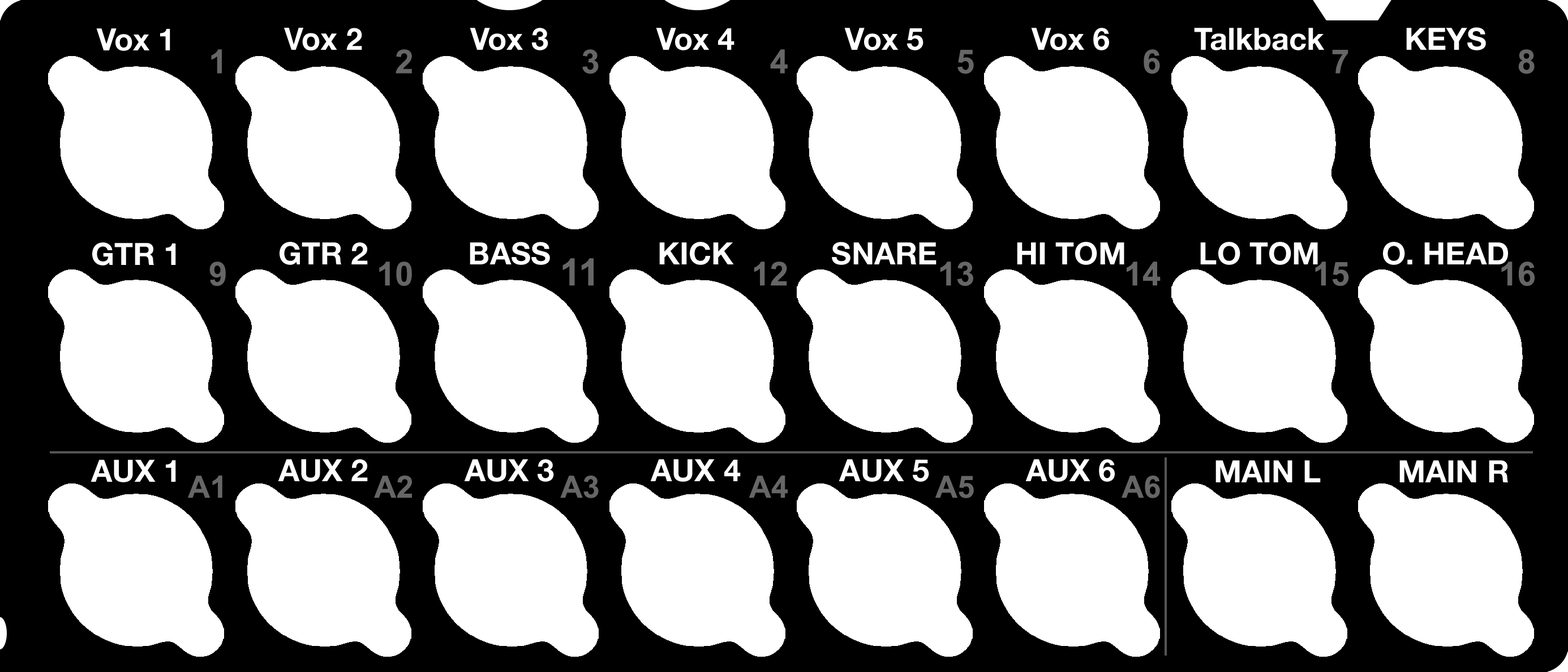
<style>
.page{position:relative;width:1568px;height:672px;background:#ffffff}
.page>*{position:absolute;margin:0}
.t1{font:30.6px "HelveticaNeue-Bold";color:#ffffff}
.t2{font:30.6px "Helvetica-Bold";color:#ffffff}
.t3{font:33px "Arial-BoldMT";color:#666666}
.t4{font:37.7px "Arial-BoldMT";color:#666666}
.t5{font:30.6px "Arial-BoldMT";color:#666666}
</style>
<div class="page">
<p class="t1" style="left:96px;top:28px;width:74px;height:23px">Vox 1</p>
<p class="t2" style="left:284px;top:28px;width:78px;height:22px">Vox 2</p>
<p class="t1" style="left:470px;top:28px;width:78px;height:22px">Vox 3</p>
<p class="t1" style="left:656px;top:28px;width:78px;height:22px">Vox 4</p>
<p class="t1" style="left:844px;top:28px;width:79px;height:22px">Vox 5</p>
<p class="t1" style="left:1031px;top:28px;width:78px;height:22px">Vox 6</p>
<p class="t1" style="left:1194px;top:28px;width:131px;height:22px">Talkback</p>
<p class="t1" style="left:1406px;top:27px;width:80px;height:23px">KEYS</p>
<p class="t3" style="left:211px;top:49px;width:11px;height:25px">1</p>
<p class="t3" style="left:396px;top:49px;width:16px;height:25px">2</p>
<p class="t3" style="left:582px;top:49px;width:17px;height:25px">3</p>
<p class="t3" style="left:770px;top:49px;width:18px;height:25px">4</p>
<p class="t3" style="left:957px;top:50px;width:17px;height:24px">5</p>
<p class="t3" style="left:1144px;top:49px;width:16px;height:25px">6</p>
<p class="t3" style="left:1332px;top:50px;width:16px;height:24px">7</p>
<p class="t3" style="left:1518px;top:49px;width:17px;height:25px">8</p>
<p class="t1" style="left:92px;top:242px;width:84px;height:23px">GTR 1</p>
<p class="t1" style="left:280px;top:242px;width:88px;height:23px">GTR 2</p>
<p class="t1" style="left:470px;top:242px;width:80px;height:23px">BASS</p>
<p class="t1" style="left:659px;top:242px;width:75px;height:23px">KICK</p>
<p class="t1" style="left:832px;top:242px;width:104px;height:23px">SNARE</p>
<p class="t1" style="left:1017px;top:242px;width:107px;height:23px">HI TOM</p>
<p class="t1" style="left:1200px;top:242px;width:118px;height:23px">LO TOM</p>
<p class="t1" style="left:1383px;top:242px;width:125px;height:23px">O. HEAD</p>
<p class="t3" style="left:209px;top:261px;width:17px;height:25px">9</p>
<p class="t3" style="left:379px;top:261px;width:33px;height:25px">10</p>
<p class="t4" style="left:562px;top:258px;width:32px;height:28px">11</p>
<p class="t3" style="left:754px;top:261px;width:33px;height:25px">12</p>
<p class="t3" style="left:940px;top:261px;width:33px;height:25px">13</p>
<p class="t3" style="left:1127px;top:261px;width:34px;height:25px">14</p>
<p class="t3" style="left:1315px;top:261px;width:34px;height:25px">15</p>
<p class="t3" style="left:1501px;top:261px;width:34px;height:25px">16</p>
<p class="t1" style="left:91px;top:459px;width:85px;height:23px">AUX 1</p>
<p class="t1" style="left:278px;top:459px;width:90px;height:23px">AUX 2</p>
<p class="t1" style="left:464px;top:459px;width:90px;height:23px">AUX 3</p>
<p class="t1" style="left:650px;top:459px;width:91px;height:23px">AUX 4</p>
<p class="t1" style="left:839px;top:459px;width:90px;height:23px">AUX 5</p>
<p class="t1" style="left:1025px;top:459px;width:90px;height:23px">AUX 6</p>
<p class="t1" style="left:1215px;top:460px;width:106px;height:22px">MAIN L</p>
<p class="t1" style="left:1399px;top:460px;width:110px;height:22px">MAIN R</p>
<p class="t5" style="left:188px;top:475px;width:34px;height:23px">A1</p>
<p class="t5" style="left:374px;top:475px;width:38px;height:23px">A2</p>
<p class="t5" style="left:560px;top:475px;width:39px;height:23px">A3</p>
<p class="t5" style="left:749px;top:475px;width:39px;height:23px">A4</p>
<p class="t5" style="left:935px;top:475px;width:39px;height:23px">A5</p>
<p class="t5" style="left:1122px;top:475px;width:38px;height:23px">A6</p>
</div>
